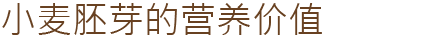
<style>
.page{position:relative;width:421px;height:47px;background:#ffffff}
.page>*{position:absolute;margin:0}
.t1{font:36px "MicrosoftJhengHeiRegular";color:#684121}
</style>
<div class="page">
<p class="t1" style="left:2px;top:3px;width:320px;height:32px">小麦胚芽的营养价值</p>
</div>
